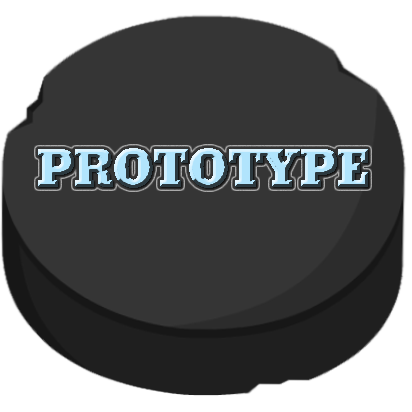
<style>
.page{position:relative;width:412px;height:412px;background:#353535}
.page>*{position:absolute;margin:0}
.t1{font:48px "Bevan";letter-spacing:-0.02em}
</style>
<div class="page">
<p class="t1" style="left:38px;top:148px;width:330px;height:40px">PROTOTYPE</p>
</div>
